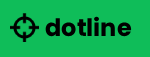
<style>
.page{position:relative;width:150px;height:57px;background:#0fbd59}
.page>*{position:absolute;margin:0}
.t1{font:24px "Poppins-Bold";color:#000000}
</style>
<div class="page">
<p class="t1" style="left:45px;top:16px;width:87px;height:21px">dotline</p>
</div>
